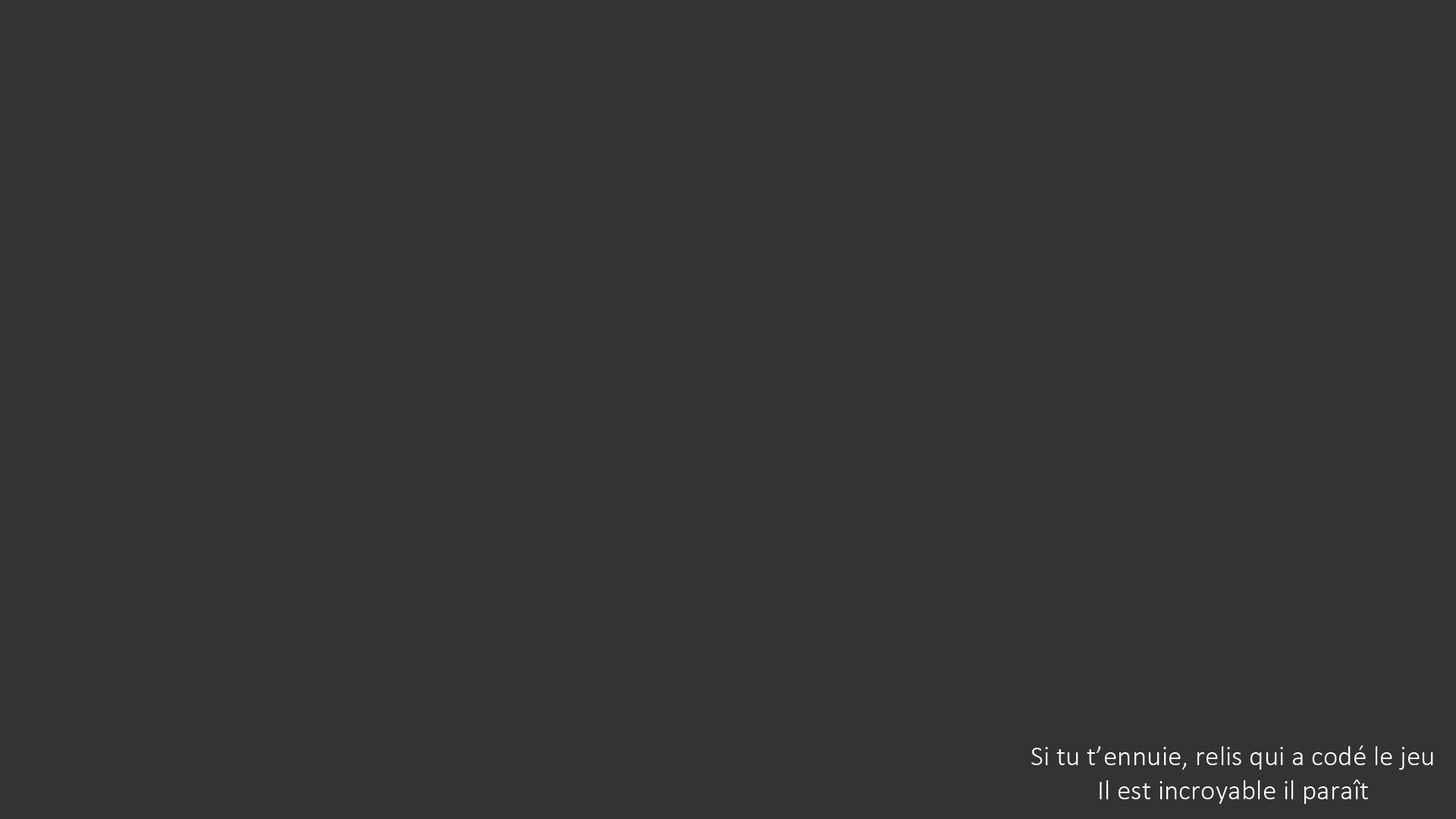
<style>
.page{position:relative;width:1456px;height:819px;background:#333333}
.page>*{position:absolute;margin:0}
.t1{font:28.4px "Calibri-Light";color:#ffffff}
</style>
<div class="page">
<p class="t1" style="left:1031px;top:745px;width:402px;height:59px;text-align:center">Si tu t’ennuie, relis qui a codé le jeu<br>Il est incroyable il paraît</p>
</div>
